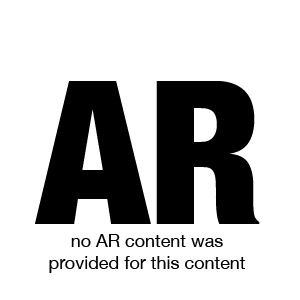
<style>
.page{position:relative;width:300px;height:300px;background:#ffffff}
.page>*{position:absolute;margin:0}
.t1{font:200px "HelveticaNeue-CondensedBlack";color:#000000}
.t2{font:18px "HelveticaNeue";color:#000000}
</style>
<div class="page">
<p class="t1" style="left:35px;top:81px;width:225px;height:143px">AR</p>
<p class="t2" style="left:49px;top:234px;width:196px;height:39px;text-align:center">no AR content was<br>provided for this content</p>
</div>
